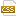
<style>
.page{position:relative;width:16px;height:16px}
.page>*{position:absolute;margin:0}
.t1{font:9px "Lato-Medium";color:#f0f0f0}
</style>
<div class="page">
<p class="t1" style="left:2px;top:7px;width:12px;height:5px">css</p>
</div>
